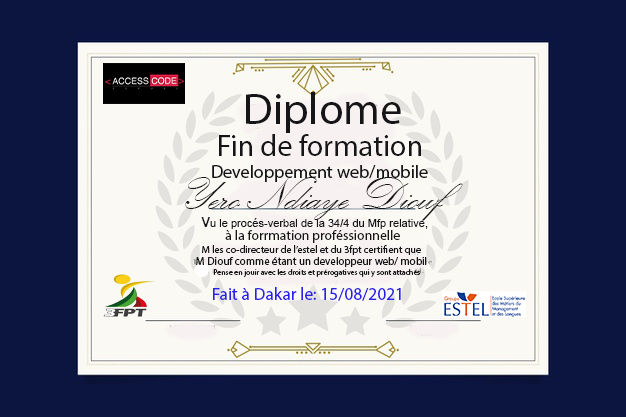
<style>
.page{position:relative;width:626px;height:417px;background:#0c1540}
.page>*{position:absolute;margin:0}
.t1{font:44.3px "MyriadPro-Regular";color:#151518}
.t2{font:30px "MyriadPro-Regular";color:#151518}
.t3{font:18px "MyriadPro-Regular";color:#151518}
.t4{font:48px "KunstlerScript";color:#151518}
.t5{font:11px "ArialMT";color:#151518}
.t6{font:17.7px "ArialMT";color:#151518}
.t7{font:13.8px "MyriadPro-Regular";color:#151518}
.t8{font:10.3px "MyriadPro-Regular";color:#151518}
.t9{font:11px "MyriadPro-Regular";color:#151518}
.t10{font:7.9px "MyriadPro-Regular";color:#151518}
.t11{font:17.5px "MyriadPro-Regular";color:#2920ea}
</style>
<div class="page">
<p class="t1" style="left:246px;top:92px;width:155px;height:41px">Diplome</p>
<p class="t2" style="left:219px;top:134px;width:202px;height:22px">Fin de formation</p>
<p class="t3" style="left:212px;top:165px;width:216px;height:17px">Developpement web/mobile</p>
<p class="t4" style="left:185px;top:177px;width:278px;height:44px">Yero Ndiaye Diouf</p>
<p class="t5" style="left:201px;top:217px;width:227px;height:12px"><span class="t6">v</span>u le procés-verbal de la 34/4 du Mfp relative,</p>
<p class="t7" style="left:225px;top:230px;width:175px;height:13px">à la forrmation proféssionnelle</p>
<p class="t8" style="left:202px;top:245px;width:219px;height:10px">M les co-directeur de l’estel et du 3fpt certifient que</p>
<p class="t9" style="left:196px;top:257px;width:231px;height:10px">M Diouf comme étant un developpeur web/ mobil</p>
<p class="t10" style="left:213px;top:269px;width:208px;height:8px">Pense en jouir avec les droits et prérogatives qui y sont attachés</p>
<p class="t11" style="left:213px;top:287px;width:188px;height:14px">Fait à Dakar le: 15/08/2021</p>
</div>
